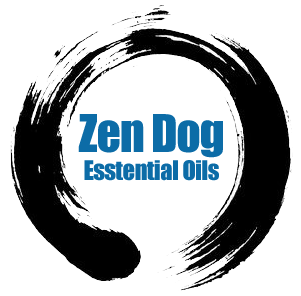
<style>
.page{position:relative;width:301px;height:296px;background:#ffffff}
.page>*{position:absolute;margin:0}
.t1{font:25px/14px "Impact";letter-spacing:-0.025em;color:#0c6ca7}
.t2{font:48px/14px "Impact";letter-spacing:-0.025em;color:#0c6ca7}
.t3{font:24px/14px "Impact";letter-spacing:-0.025em;color:#0c6ca7}
</style>
<div class="page">
<p class="t1" style="left:78px;top:114px;width:145px;height:67px;text-align:center"><span class="t2">Zen Dog<br></span><span class="t3"><br></span>Esstential Oils</p>
</div>
